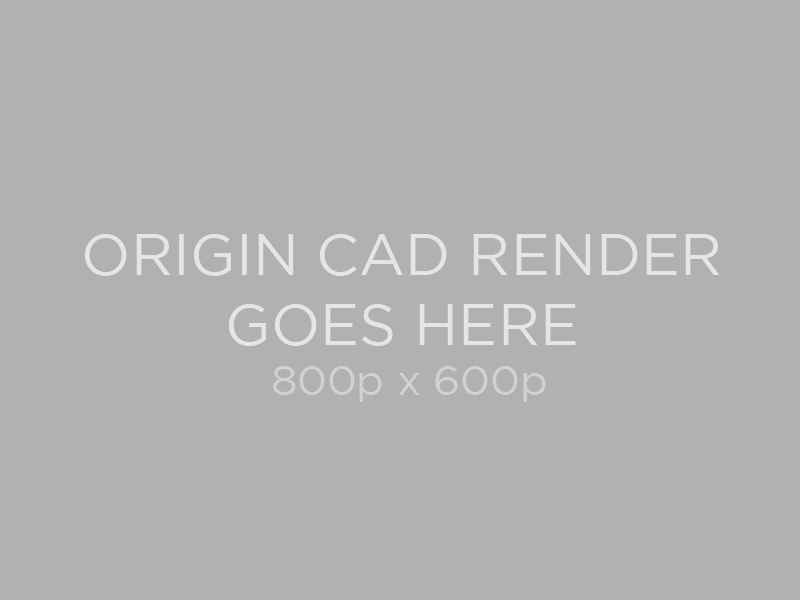
<style>
.page{position:relative;width:800px;height:600px;background:#b1b1b1}
.page>*{position:absolute;margin:0}
.t1{font:58.3px "GothamBook";color:#e5e5e5}
.t2{font:41.7px "GothamBook";color:#d1d1d1}
</style>
<div class="page">
<p class="t1" style="left:84px;top:234px;width:636px;height:112px;text-align:center">ORIGIN CAD RENDER GOES HERE</p>
<p class="t2" style="left:273px;top:366px;width:273px;height:36px">800p x 600p</p>
</div>
